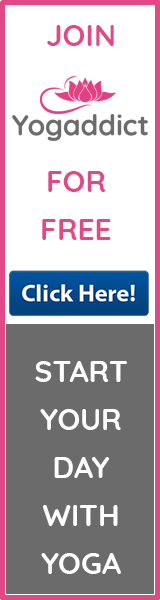
<style>
.page{position:relative;width:160px;height:600px;background:#ffffff}
.page>*{position:absolute;margin:0}
.t1{font:30px "Quicksand-Bold";color:#e24886}
.t2{font:30px/24px "Quicksand-Bold";color:#e24886}
.t3{font:30px/24px "Quicksand-Bold";color:#ffffff}
</style>
<div class="page">
<p class="t1" style="left:47px;top:25px;width:67px;height:21px">JOIN</p>
<p class="t2" style="left:42px;top:171px;width:69px;height:69px;text-align:center">FOR<br><br>FREE</p>
<p class="t3" style="left:35px;top:361px;width:92px;height:213px;text-align:center">START<br><br>YOUR<br><br>DAY<br><br>WITH<br><br>YOGA</p>
</div>
